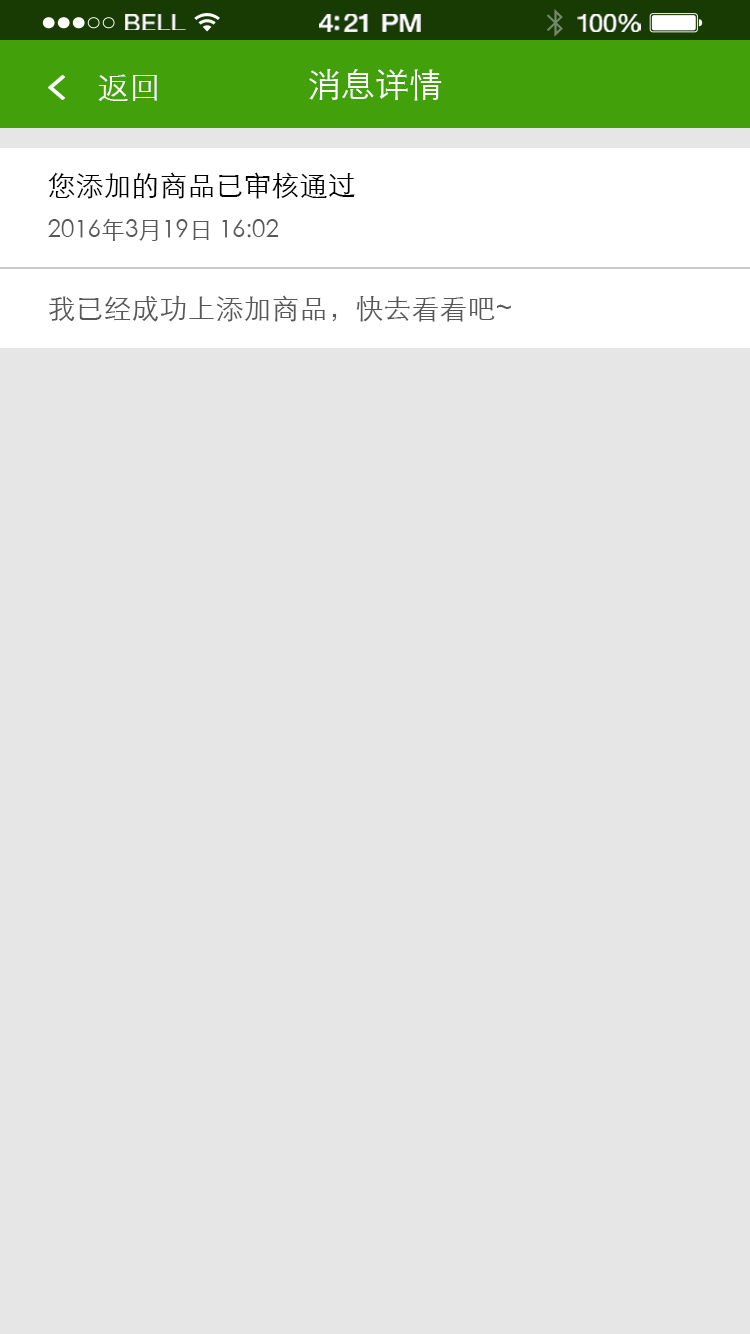
<style>
.page{position:relative;width:750px;height:1334px;background:#e6e6e6}
.page>*{position:absolute;margin:0}
.t1{font:23.3px "HelveticaNeue";letter-spacing:0.02em;color:#ffffff;scale:1.06 1}
.t2{font:25.3px "HelveticaNeue-Medium";letter-spacing:-0.02em;color:#ffffff;scale:1.06 1}
.t3{font:24.3px "HelveticaNeue";letter-spacing:-0.02em;color:#ffffff;scale:1.06 1}
.t4{font:32px "STXihei";color:#ffffff}
.t5{font:34px "STXihei";color:#ffffff}
.t6{font:24px/46px "STXihei";color:#595757}
.t7{font:28px/46px "STXihei";color:#000000}
.t8{font:28px "STXihei";color:#595757}
</style>
<div class="page">
<p class="t1" style="left:125px;top:14px;width:61px;height:16px">BELL</p>
<p class="t2" style="left:319px;top:14px;width:102px;height:18px">4:21 PM</p>
<p class="t3" style="left:577px;top:14px;width:64px;height:18px">100%</p>
<p class="t4" style="left:98px;top:74px;width:59px;height:27px">返回</p>
<p class="t5" style="left:309px;top:69px;width:133px;height:32px">消息详情</p>
<p class="t6" style="left:48px;top:172px;width:307px;height:69px"><span class="t7">您添加的商品已审核通过<br></span>2016年3月19日 16:02</p>
<p class="t8" style="left:49px;top:295px;width:462px;height:27px">我已经成功上添加商品，快去看看吧~</p>
</div>
